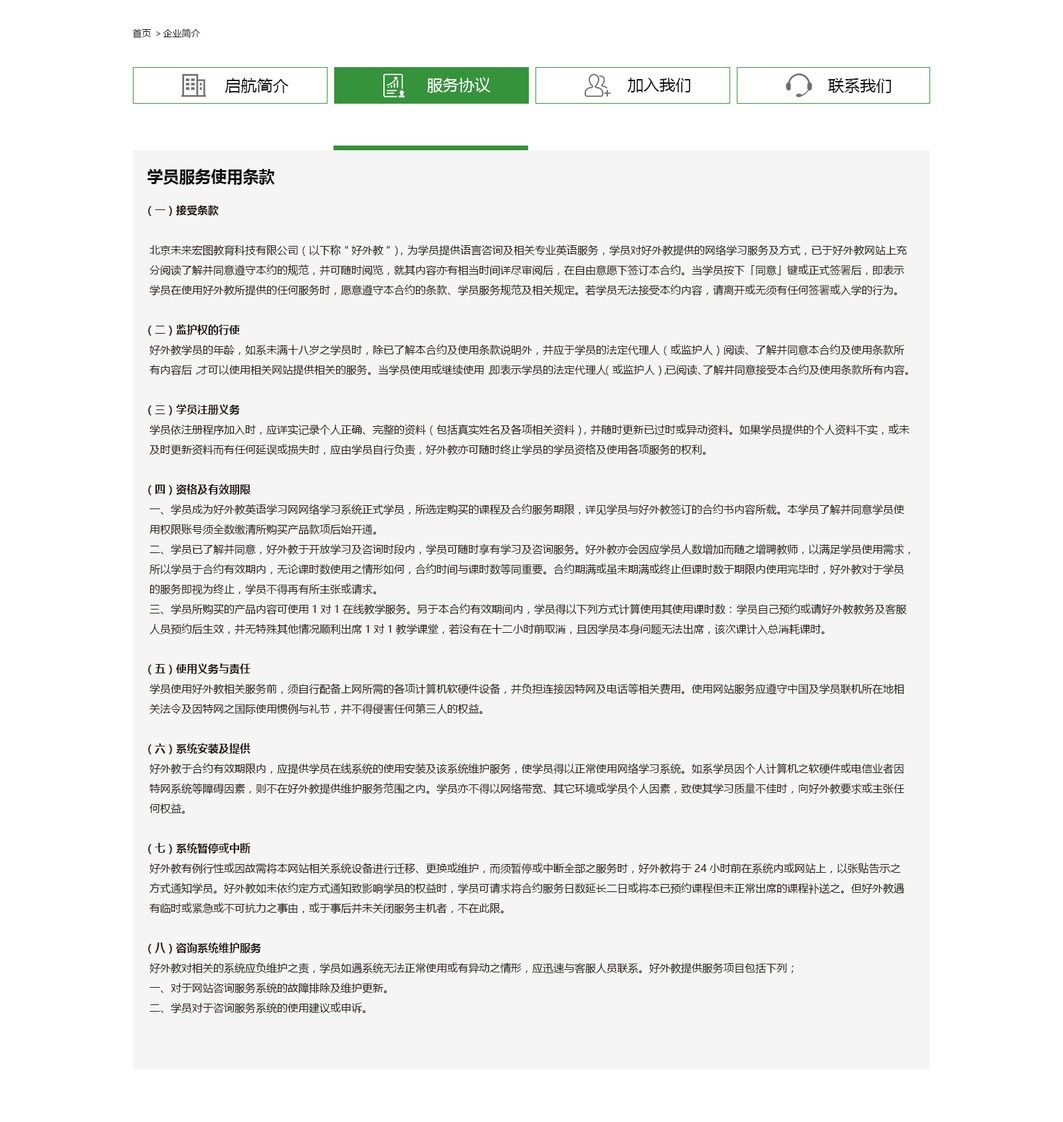
<style>
.page{position:relative;width:1063px;height:1122px;background:#f5f5f5}
.page>*{position:absolute;margin:0}
.t1{font:9.3px "MicrosoftYaHei";color:#111111}
.t2{font:15.9px "MicrosoftYaHei";color:#111111}
.t3{font:15.9px "MicrosoftYaHei";color:#ffffff}
.t4{font:15.9px "MicrosoftYaHei-Bold";color:#111111}
.t5{font:10.6px/19.9px "MicrosoftYaHei";color:#231815}
.t6{font:10.6px/19.9px "MicrosoftYaHei-Bold";color:#231815}
</style>
<div class="page">
<p class="t1" style="left:132px;top:29px;width:69px;height:9px">首页 ＞企业简介</p>
<p class="t2" style="left:225px;top:78px;width:64px;height:15px">启航简介</p>
<p class="t3" style="left:427px;top:77px;width:63px;height:16px">服务协议</p>
<p class="t2" style="left:627px;top:78px;width:63px;height:14px">加入我们</p>
<p class="t2" style="left:828px;top:78px;width:63px;height:15px">联系我们</p>
<p class="t4" style="left:148px;top:169px;width:127px;height:16px">学员服务使用条款</p>
<p class="t5" style="left:148px;top:205px;width:762px;height:808px"><span class="t6">（一）接受条款<br></span><br>北京未来宏图教育科技有限公司（以下称“好外教”），为学员提供语言咨询及相关专业英语服务，学员对好外教提供的网络学习服务及方式，已于好外教网站上充分阅读了解并同意遵守本约的规范，并可随时阅览，就其内容亦有相当时间详尽审阅后，在自由意愿下签订本合约。当学员按下「同意」键或正式签署后，即表示学员在使用好外教所提供的任何服务时，愿意遵守本合约的条款、学员服务规范及相关规定。若学员无法接受本约内容，请离开或无须有任何签署或入学的行为。 <br><br><span class="t6">（二）监护权的行使<br></span>好外教学员的年龄，如系未满十八岁之学员时，除已了解本合约及使用条款说明外，并应于学员的法定代理人（或监护人）阅读、了解并同意本合约及使用条款所有内容后，才可以使用相关网站提供相关的服务。当学员使用或继续使用，即表示学员的法定代理人（或监护人），已阅读、了解并同意接受本合约及使用条款所有内容。<br><br><span class="t6">（三）学员注册义务<br></span>学员依注册程序加入时，应详实记录个人正确、完整的资料（包括真实姓名及各项相关资料），并随时更新已过时或异动资料。如果学员提供的个人资料不实，或未及时更新资料而有任何延误或损失时，应由学员自行负责，好外教亦可随时终止学员的学员资格及使用各项服务的权利。 <br><br><span class="t6">（四）资格及有效期限<br></span>一、学员成为好外教英语学习网网络学习系统正式学员，所选定购买的课程及合约服务期限，详见学员与好外教签订的合约书内容所载。本学员了解并同意学员使用权限账号须全数缴清所购买产品款项后始开通。<br>二、学员已了解并同意，好外教于开放学习及咨询时段内，学员可随时享有学习及咨询服务。好外教亦会因应学员人数增加而随之增聘教师，以满足学员使用需求，所以学员于合约有效期内，无论课时数使用之情形如何，合约时间与课时数等同重要。合约期满或虽未期满或终止但课时数于期限内使用完毕时，好外教对于学员的服务即视为终止，学员不得再有所主张或请求。<br>三、学员所购买的产品内容可使用1对1在线教学服务。另于本合约有效期间内，学员得以下列方式计算使用其使用课时数： 学员自己预约或请好外教教务及客服人员预约后生效，并无特殊其他情况顺利出席1对1教学课堂，若没有在十二小时前取消，且因学员本身问题无法出席，该次课计入总消耗课时。<br><br><span class="t6">（五）使用义务与责任<br></span>学员使用好外教相关服务前，须自行配备上网所需的各项计算机软硬件设备，并负担连接因特网及电话等相关费用。使用网站服务应遵守中国及学员联机所在地相关法令及因特网之国际使用惯例与礼节，并不得侵害任何第三人的权益。<br><span class="t6"><br>（六）系统安装及提供<br></span>好外教于合约有效期限内，应提供学员在线系统的使用安装及该系统维护服务，使学员得以正常使用网络学习系统。如系学员因个人计算机之软硬件或电信业者因特网系统等障碍因素，则不在好外教提供维护服务范围之内。学员亦不得以网络带宽、其它环境或学员个人因素，致使其学习质量不佳时，向好外教要求或主张任何权益。<br><br><span class="t6">（七）系统暂停或中断<br></span>好外教有例行性或因故需将本网站相关系统设备进行迁移、更换或维护，而须暂停或中断全部之服务时，好外教将于24小时前在系统内或网站上，以张贴告示之方式通知学员。好外教如未依约定方式通知致影响学员的权益时，学员可请求将合约服务日数延长二日或将本已预约课程但未正常出席的课程补送之。但好外教遇有临时或紧急或不可抗力之事由，或于事后并未关闭服务主机者，不在此限。<br><span class="t6"><br>（八）咨询系统维护服务<br></span>好外教对相关的系统应负维护之责，学员如遇系统无法正常使用或有异动之情形，应迅速与客服人员联系。好外教提供服务项目包括下列；<br>一、对于网站咨询服务系统的故障排除及维护更新。<br>二、学员对于咨询服务系统的使用建议或申诉。<br>三、学员个人资料申请、变更的协助。<br>四、其它与学员权益有关并依约定提供服务的事宜。</p>
</div>
